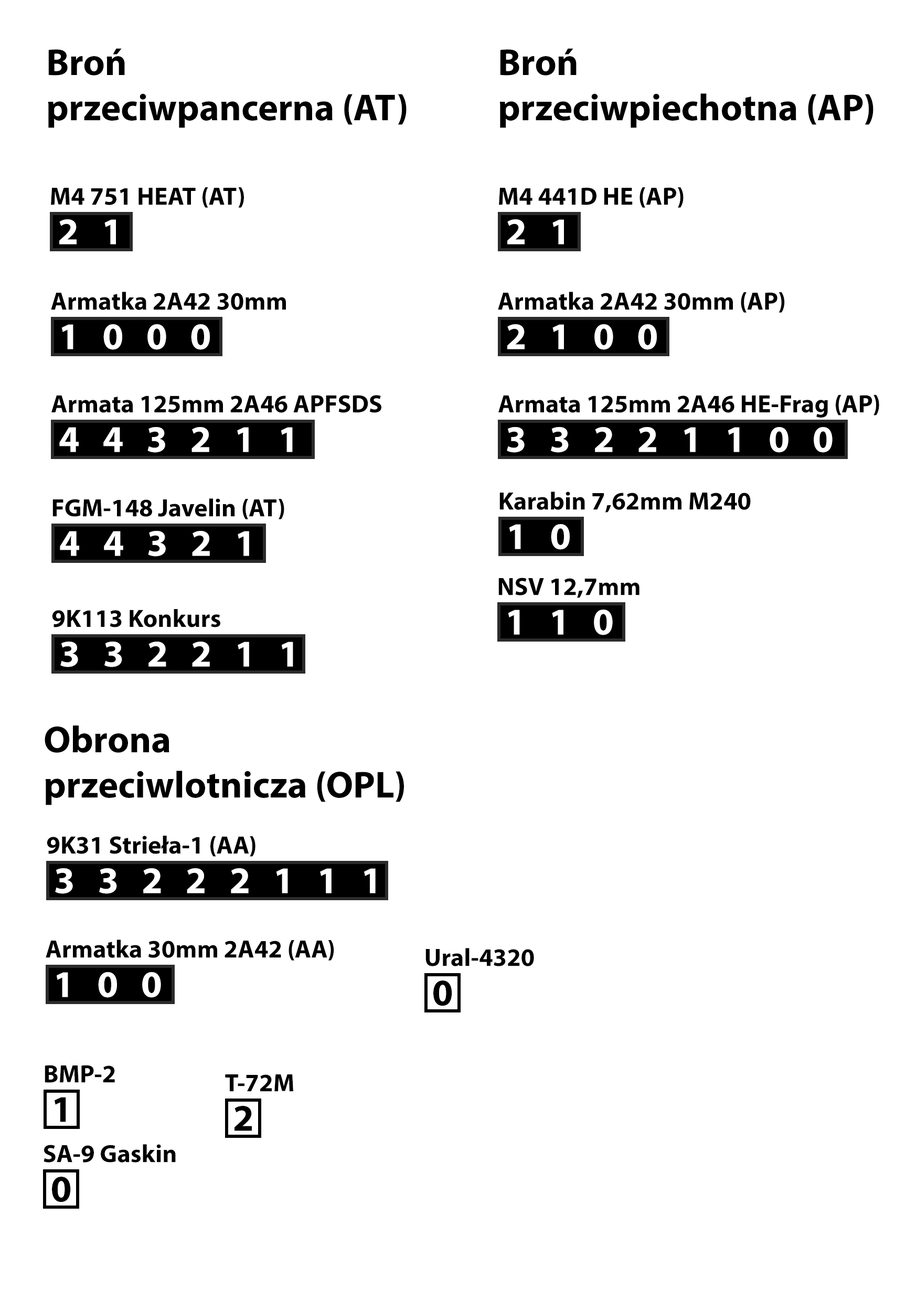
<style>
.page{position:relative;width:917px;height:1301px;background:#ffffff}
.page>*{position:absolute;margin:0}
.t1{font:37.8px "MyriadPro-Bold";color:#000000}
.t2{font:25.2px "MyriadPro-Bold";color:#000000}
.t3{font:37.8px "MyriadPro-Bold";color:#ffffff}
</style>
<div class="page">
<p class="t1" style="left:48px;top:48px;width:358px;height:80px">Broń<br>przeciwpancerna (AT)</p>
<p class="t1" style="left:500px;top:48px;width:373px;height:80px">Broń<br>przeciwpiechotna (AP)</p>
<p class="t2" style="left:51px;top:187px;width:193px;height:21px">M4 751 HEAT (AT)</p>
<p class="t2" style="left:499px;top:187px;width:184px;height:21px">M4 441D HE (AP)</p>
<p class="t3" style="left:59px;top:219px;width:57px;height:25px">2   1</p>
<p class="t3" style="left:507px;top:219px;width:57px;height:25px">2   1</p>
<p class="t2" style="left:51px;top:292px;width:235px;height:18px">Armatka 2A42 30mm</p>
<p class="t2" style="left:498px;top:292px;width:287px;height:21px">Armatka 2A42 30mm (AP)</p>
<p class="t3" style="left:62px;top:324px;width:148px;height:26px">1   0   0   0</p>
<p class="t3" style="left:507px;top:324px;width:150px;height:26px">2   1   0   0</p>
<p class="t2" style="left:51px;top:395px;width:330px;height:18px">Armata 125mm 2A46 APFSDS</p>
<p class="t2" style="left:498px;top:394px;width:381px;height:23px">Armata 125mm 2A46 HE-Frag (AP)</p>
<p class="t3" style="left:59px;top:427px;width:234px;height:26px">4   4   3   2   1   1</p>
<p class="t3" style="left:507px;top:427px;width:325px;height:26px">3   3   2   2   1   1   0   0</p>
<p class="t2" style="left:499px;top:491px;width:252px;height:21px">Karabin 7,62mm M240</p>
<p class="t2" style="left:52px;top:498px;width:232px;height:21px">FGM-148 Javelin (AT)</p>
<p class="t3" style="left:60px;top:531px;width:189px;height:25px">4   4   3   2   1</p>
<p class="t3" style="left:509px;top:524px;width:61px;height:26px">1   0</p>
<p class="t2" style="left:498px;top:577px;width:141px;height:21px">NSV 12,7mm</p>
<p class="t2" style="left:52px;top:609px;width:168px;height:18px">9K113 Konkurs</p>
<p class="t3" style="left:508px;top:609px;width:105px;height:26px">1   1   0</p>
<p class="t3" style="left:60px;top:641px;width:233px;height:26px">3   3   2   2   1   1</p>
<p class="t1" style="left:45px;top:725px;width:359px;height:80px">Obrona<br>przeciwlotnicza (OPL)</p>
<p class="t2" style="left:47px;top:835px;width:208px;height:21px">9K31 Strieła-1 (AA)</p>
<p class="t3" style="left:55px;top:868px;width:321px;height:26px">3   3   2   2   2   1   1   1</p>
<p class="t2" style="left:46px;top:939px;width:288px;height:21px">Armatka 30mm 2A42 (AA)</p>
<p class="t2" style="left:425px;top:948px;width:109px;height:18px">Ural-4320</p>
<p class="t3" style="left:57px;top:972px;width:104px;height:26px">1   0   0</p>
<p class="t1" style="left:433px;top:980px;width:19px;height:26px">0</p>
<p class="t2" style="left:45px;top:1065px;width:70px;height:18px">BMP-2</p>
<p class="t2" style="left:225px;top:1074px;width:68px;height:17px">T-72M</p>
<p class="t1" style="left:55px;top:1097px;width:11px;height:25px">1</p>
<p class="t1" style="left:234px;top:1106px;width:18px;height:25px">2</p>
<p class="t2" style="left:44px;top:1144px;width:132px;height:18px">SA-9 Gaskin</p>
<p class="t1" style="left:52px;top:1176px;width:19px;height:26px">0</p>
</div>
